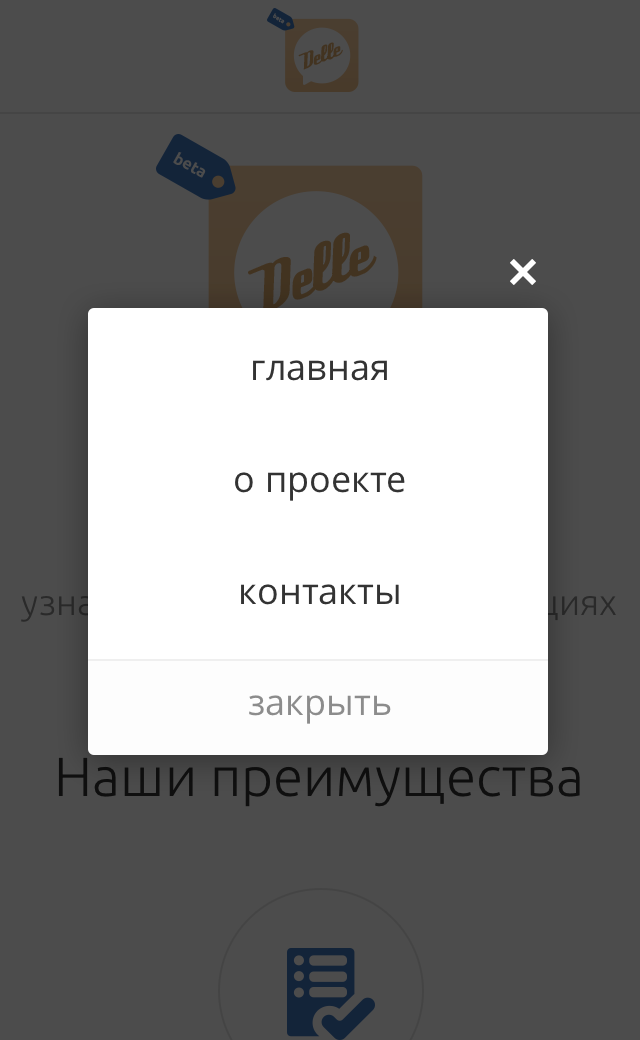
<style>
.page{position:relative;width:640px;height:1040px;background:#4c4c4c}
.page>*{position:absolute;margin:0}
.t1{font:5.6px "Ubuntu-Bold"}
.t2{font:23.8px "DeftoneStylus";color:#423320}
.t3{font:16.3px "Ubuntu-Bold";color:#4c4c4c}
.t4{font:69.5px "DeftoneStylus";color:#423320}
.t5{font:36px/112px "OpenSans";color:#333333}
.t6{font:36px "OpenSans";color:#8c8c8c}
.t7{font:55px "Ubuntu-Light";color:#0f0f0f}
</style>
<div class="page">
<p class="t1" style="left:273px;top:13px;width:12px;height:11px;rotate:29deg">beta</p>
<p class="t2" style="left:298px;top:42px;width:45px;height:28px;rotate:-22deg">Delle</p>
<p class="t3" style="left:173px;top:152px;width:33px;height:26px;rotate:29deg">beta</p>
<p class="t4" style="left:248px;top:232px;width:129px;height:82px;rotate:-22deg">Delle</p>
<p class="t5" style="left:235px;top:360px;width:170px;height:245px;text-align:center">главная<br>о проекте<br>контакты</p>
<p class="t6" style="left:249px;top:695px;width:142px;height:29px">закрыть</p>
<p class="t7" style="left:58px;top:757px;width:522px;height:50px">Наши преимущества</p>
</div>
